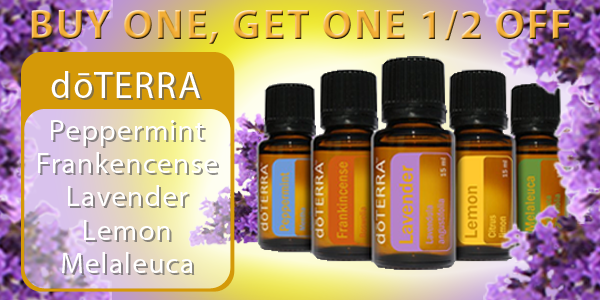
<style>
.page{position:relative;width:600px;height:300px}
.page>*{position:absolute;margin:0}
.t1{font:41.7px "MyriadPro-Bold";letter-spacing:0.045em;text-transform:uppercase}
.t2{font:37.5px "MyriadPro-Regular";letter-spacing:0.045em;color:#ffffff}
.t3{font:37.5px "MyriadPro-Regular";letter-spacing:0.045em}
.t4{font:29.2px/33.3px "MyriadPro-Regular";letter-spacing:0.045em;color:#ffffff}
.t5{font:29.2px/33.3px "MyriadPro-Regular";letter-spacing:0.045em}
</style>
<div class="page">
<p class="t1" style="left:31px;top:10px;width:539px;height:34px">Buy one, get one 1/2 off</p>
<p class="t2" style="left:51px;top:71px;width:150px;height:27px">doTERRA</p>
<p class="t3" style="left:53px;top:73px;width:150px;height:27px">doTERRA</p>
<p class="t4" style="left:38px;top:120px;width:179px;height:153px;text-align:center">Peppermint<br>Frankencense<br>Lavender<br>Lemon<br>Melaleuca</p>
<p class="t5" style="left:40px;top:122px;width:179px;height:153px;text-align:center">Peppermint<br>Frankencense<br>Lavender<br>Lemon<br>Melaleuca</p>
</div>
